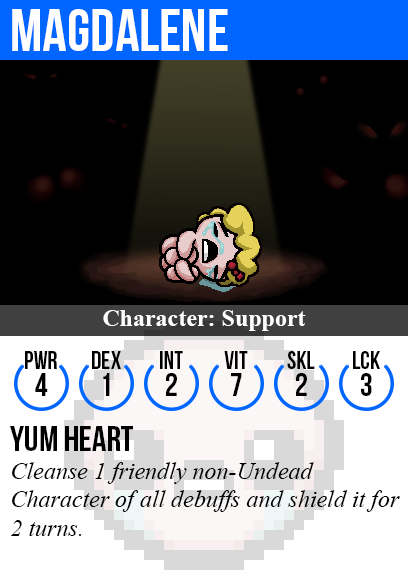
<style>
.page{position:relative;width:408px;height:585px;background:#000000}
.page>*{position:absolute;margin:0}
.t1{font:60px "BebasNeue";color:#ffffff}
.t2{font:24px "TimesNewRomanPS-BoldMT";color:#ffffff}
.t3{font:25px "BebasNeue";color:#000000}
.t4{font:32px "BebasNeue";color:#000000}
.t5{font:36px "BebasNeue";color:#000000}
.t6{font:24px "TimesNewRomanPS-ItalicMT";color:#000000}
</style>
<div class="page">
<p class="t1" style="left:12px;top:9px;width:216px;height:42px">magdalene</p>
<p class="t2" style="left:103px;top:310px;width:203px;height:21px">Character: Support</p>
<p class="t3" style="left:25px;top:351px;width:32px;height:18px">PWR</p>
<p class="t3" style="left:92px;top:351px;width:29px;height:18px">dex</p>
<p class="t3" style="left:160px;top:351px;width:23px;height:18px">int</p>
<p class="t3" style="left:224px;top:351px;width:24px;height:18px">vit</p>
<p class="t3" style="left:287px;top:351px;width:28px;height:18px">skl</p>
<p class="t3" style="left:353px;top:351px;width:27px;height:18px">lck</p>
<p class="t4" style="left:35px;top:373px;width:13px;height:23px">4</p>
<p class="t4" style="left:103px;top:373px;width:7px;height:23px">1</p>
<p class="t4" style="left:166px;top:373px;width:11px;height:23px">2</p>
<p class="t4" style="left:231px;top:373px;width:11px;height:23px">7</p>
<p class="t4" style="left:296px;top:373px;width:11px;height:23px">2</p>
<p class="t4" style="left:361px;top:373px;width:11px;height:23px">3</p>
<p class="t5" style="left:10px;top:426px;width:123px;height:25px">yum heart</p>
<p class="t6" style="left:11px;top:462px;width:389px;height:74px">Cleanse 1 friendly non-Undead<br>Character of all debuffs and shield it for<br>2 turns.</p>
</div>
